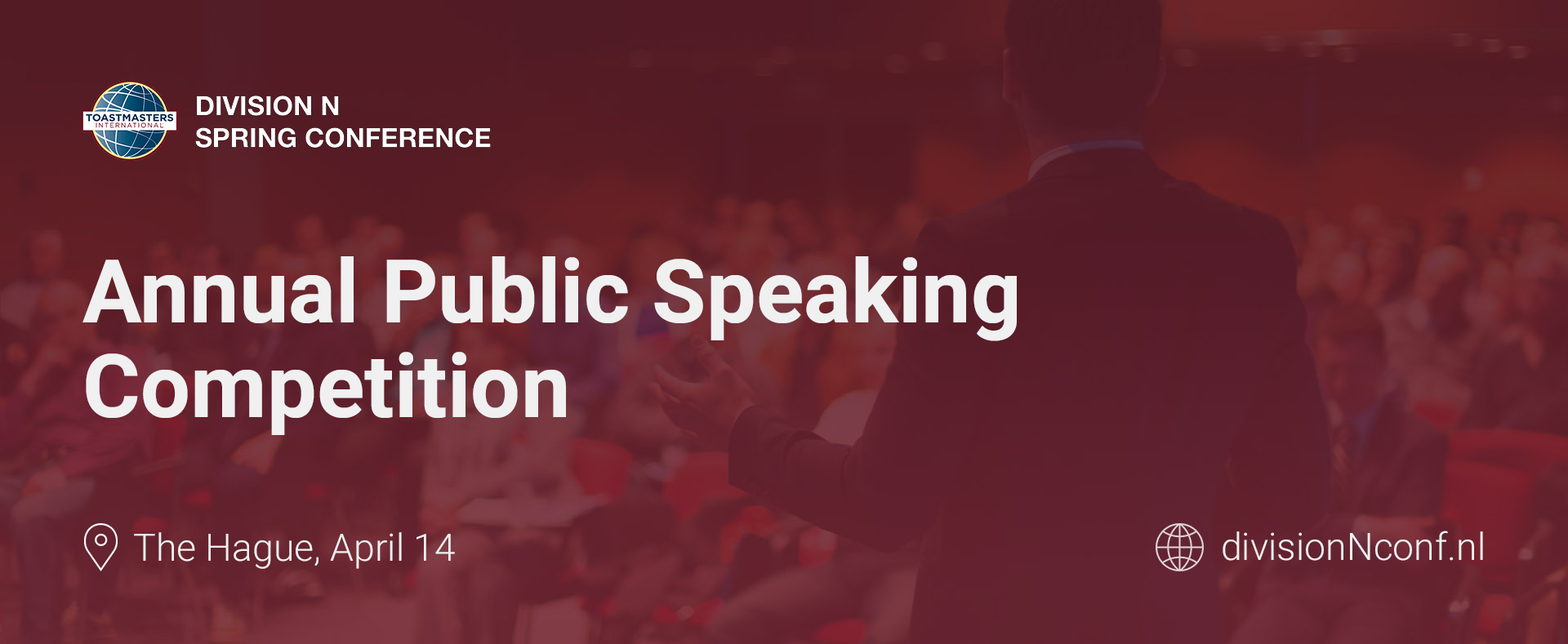
<style>
.page{position:relative;width:1568px;height:644px}
.page>*{position:absolute;margin:0}
.t1{font:88.3px/94.6px "Roboto-Bold";color:#f0f0f0}
.t2{font:37.8px "Roboto-Light";color:#f0f0f0}
</style>
<div class="page">
<p class="t1" style="left:82px;top:256px;width:935px;height:179px">Annual Public Speaking <br>Competition</p>
<p class="t2" style="left:134px;top:532px;width:321px;height:37px">The Hague, April 14</p>
<p class="t2" style="left:1223px;top:531px;width:260px;height:30px">divisionNconf.nl</p>
</div>
